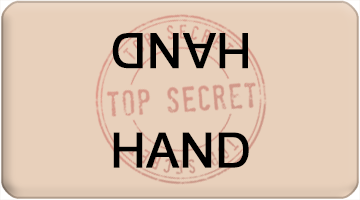
<style>
.page{position:relative;width:360px;height:200px;background:#e8d0bb}
.page>*{position:absolute;margin:0}
.t1{font:48px "ArialMT";color:#000000;font-weight:bold}
</style>
<div class="page">
<p class="t1" style="left:112px;top:33px;width:136px;height:36px;rotate:180deg">HAND</p>
<p class="t1" style="left:113px;top:132px;width:136px;height:36px">HAND</p>
</div>
